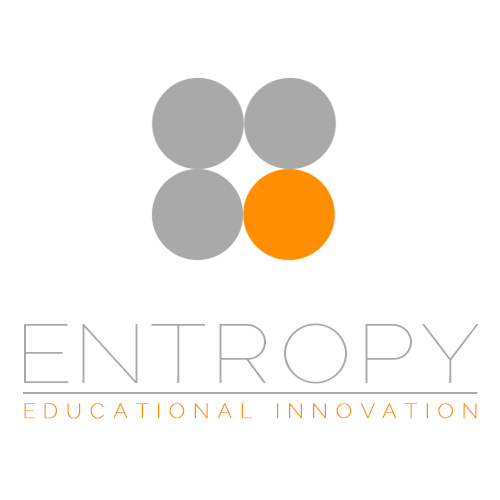
<style>
.page{position:relative;width:500px;height:500px;background:#ffffff}
.page>*{position:absolute;margin:0}
.t1{font:83.3px "Raleway-Thin";letter-spacing:0.07em;color:#aaaaaa;scale:1.14 1}
.t2{font:20.8px "Raleway-Thin";letter-spacing:0.39em;color:#ff9000;font-weight:bold}
</style>
<div class="page">
<p class="t1" style="left:24px;top:323px;width:455px;height:61px">ENTROPY</p>
<p class="t2" style="left:24px;top:403px;width:453px;height:16px">EDUCATIONAL INNOVATION</p>
</div>
